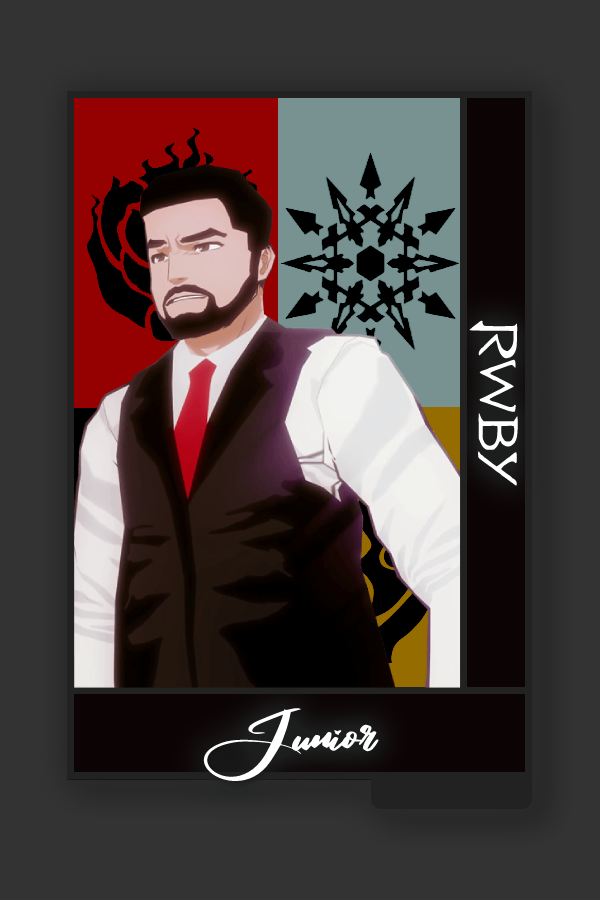
<style>
.page{position:relative;width:600px;height:900px;background:#333333}
.page>*{position:absolute;margin:0}
.t1{font:61.3px "RWBY_Style";color:#ffffff;scale:1.25 1}
.t2{font:75px "RosegaFREE";color:#ffffff}
</style>
<div class="page">
<p class="t1" style="left:469px;top:320px;width:49px;height:166px;rotate:90deg">RWBY</p>
<p class="t2" style="left:171px;top:707px;width:208px;height:101px">Junior</p>
</div>
